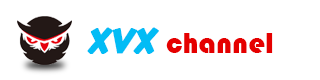
<style>
.page{position:relative;width:320px;height:80px;background:#ffffff}
.page>*{position:absolute;margin:0}
.t1{font:35.3px "BabySchool-Italic";color:#02bcf5;font-weight:bold}
.t2{font:29.5px "Bauhaus93";color:#e50000}
</style>
<div class="page">
<p class="t1" style="left:87px;top:27px;width:72px;height:27px">XVX</p>
<p class="t2" style="left:166px;top:33px;width:107px;height:20px">channel</p>
</div>
